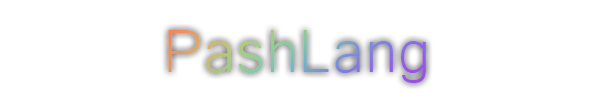
<style>
.page{position:relative;width:602px;height:100px;background:#ffffff}
.page>*{position:absolute;margin:0}
.t1{font:79.2px "Microsoft-Yi-Baiti"}
</style>
<div class="page">
<p class="t1" style="left:168px;top:30px;width:258px;height:53px">PashLang</p>
</div>
